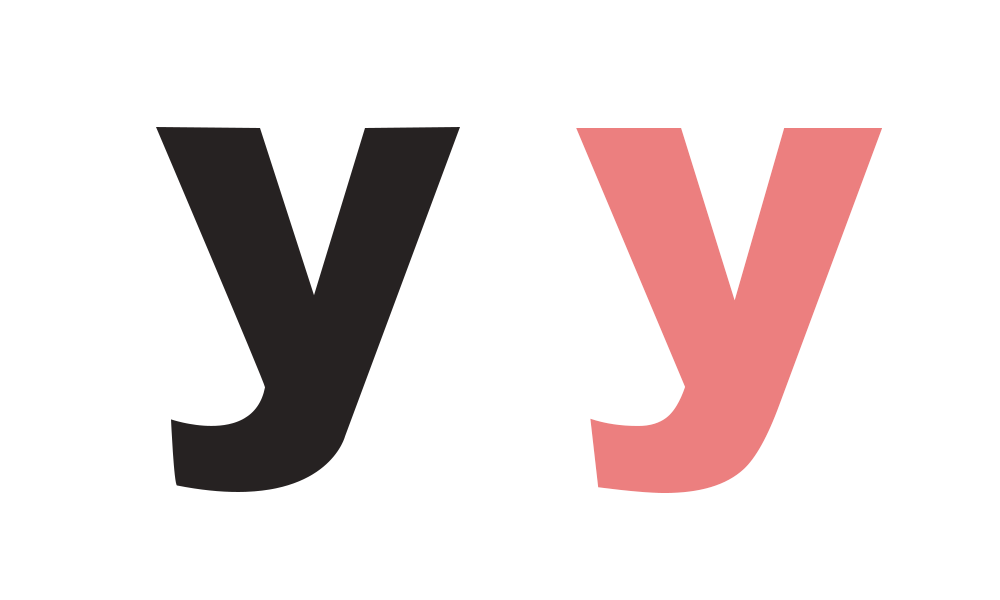
<style>
.page{position:relative;width:1000px;height:600px;background:#ffffff}
.page>*{position:absolute;margin:0}
.t1{font:500px "Arial-Black";color:#ec7f7f}
</style>
<div class="page">
<p class="t1" style="left:576px;top:128px;width:306px;height:365px">y</p>
</div>
